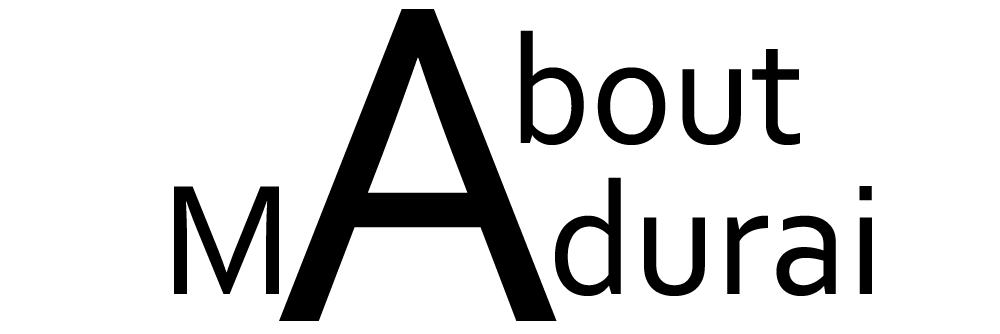
<style>
.page{position:relative;width:1000px;height:334px;background:#ffffff}
.page>*{position:absolute;margin:0}
.t1{font:477.5px "Corbel";color:#000000;scale:0.97 1}
.t2{font:158.7px "Corbel";color:#000000;scale:0.96 1}
.t3{font:164.3px "Corbel";color:#000000}
</style>
<div class="page">
<p class="t1" style="left:279px;top:9px;width:278px;height:312px">A</p>
<p class="t2" style="left:520px;top:30px;width:280px;height:115px">bout</p>
<p class="t3" style="left:174px;top:177px;width:698px;height:119px">M        durai</p>
</div>
